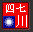
<style>
.page{position:relative;width:33px;height:32px;background:#f20000}
.page>*{position:absolute;margin:0}
.t1{font:10.4px "SimSun";color:#ffffff}
.t2{font:11.7px "SimSun";color:#ffffff}
</style>
<div class="page">
<p class="t1" style="left:6px;top:4px;width:20px;height:9px">四七</p>
<p class="t2" style="left:16px;top:15px;width:11px;height:12px">川</p>
</div>
